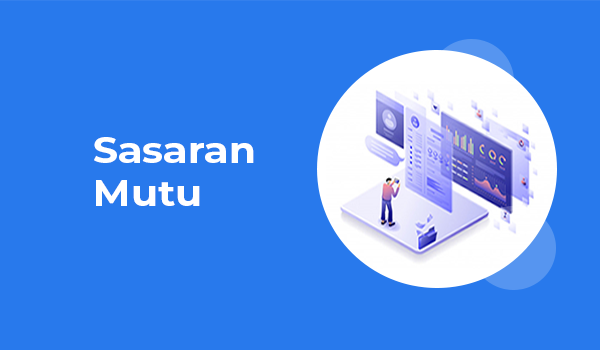
<style>
.page{position:relative;width:600px;height:350px;background:#2879ec}
.page>*{position:absolute;margin:0}
.t1{font:36px "Montserrat-Bold";color:#ffffff;scale:1.1 1}
</style>
<div class="page">
<p class="t1" style="left:94px;top:137px;width:160px;height:69px">Sasaran<br>Mutu</p>
</div>
